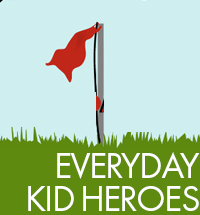
<style>
.page{position:relative;width:200px;height:215px;background:#cfeeef}
.page>*{position:absolute;margin:0}
.t1{font:37.5px/33.3px "FuturaPT-Book";letter-spacing:-0.05em;color:#ffffff;text-transform:uppercase}
</style>
<div class="page">
<p class="t1" style="left:28px;top:152px;width:172px;height:59px;text-align:right">Everyday<br>kid heroes</p>
</div>
